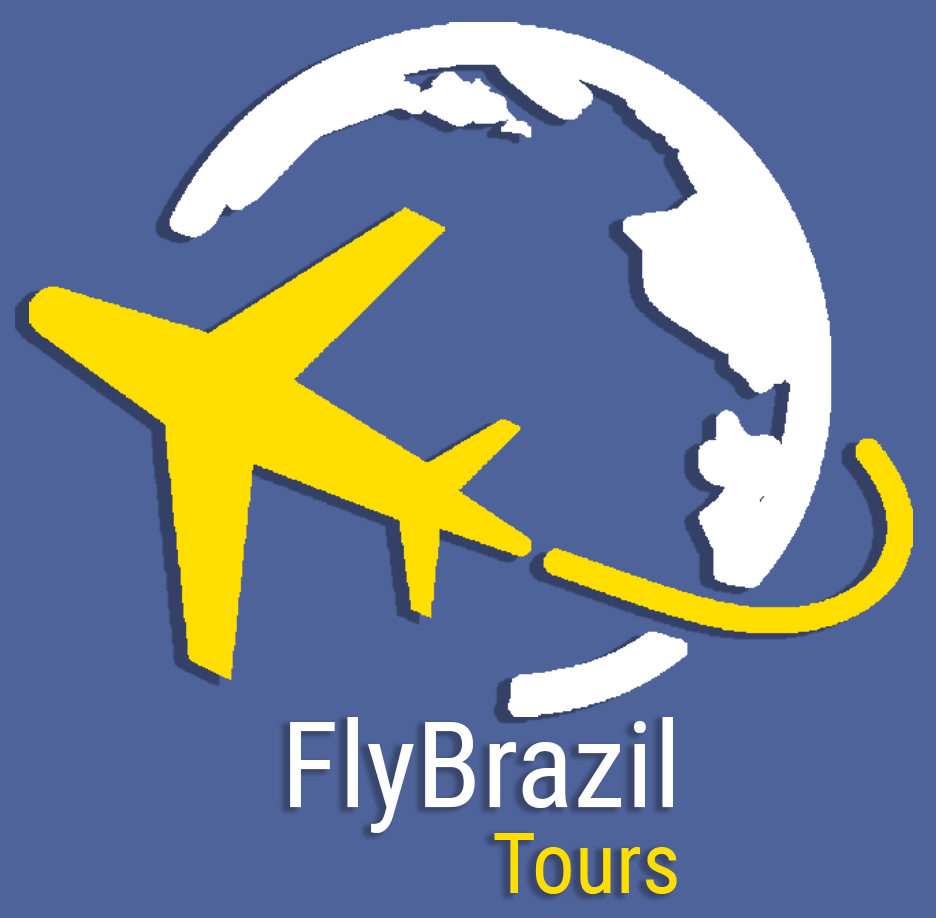
<style>
.page{position:relative;width:936px;height:918px;background:#4f639b}
.page>*{position:absolute;margin:0}
.t1{font:120px "RobotoCondensed-Regular";color:#ffffff}
</style>
<div class="page">
<p class="t1" style="left:290px;top:717px;width:383px;height:116px">FlyBrazil</p>
</div>
